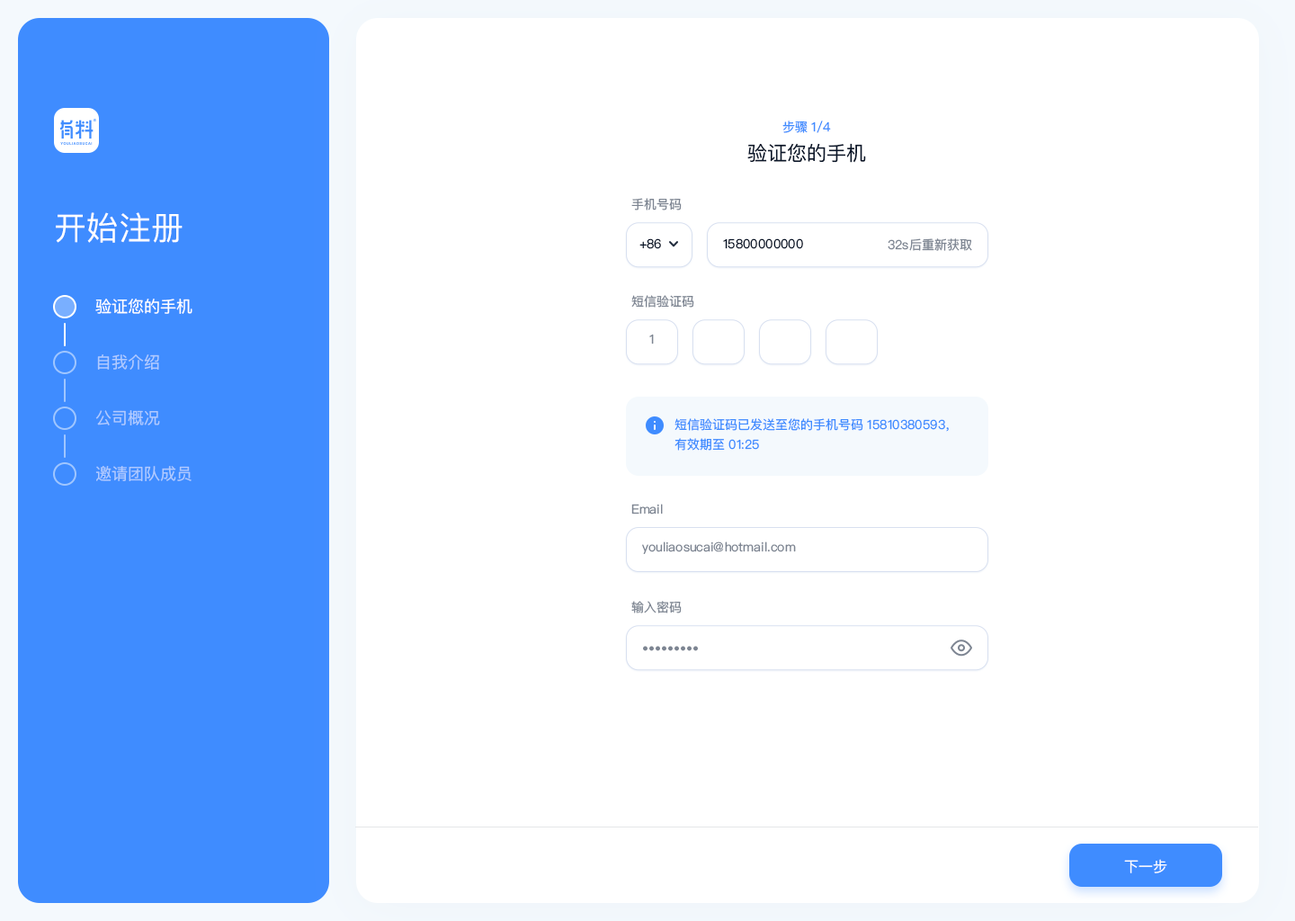
<style>
.page{position:relative;width:1295px;height:921px;background:#ffffff}
.page>*{position:absolute;margin:0}
.t1{font:12.6px "PingFangSC-Regular";color:#3f8cff;text-transform:uppercase}
.t2{font:19.8px "PingFangSC-Regular";color:#0a1629}
.t3{font:12.6px "PingFangSC-Regular";color:#7d8592}
.t4{font:32.4px "PingFangSC-Regular";color:#ffffff}
.t5{font:12.6px "PingFangSC-Regular";color:#0a1629}
.t6{font:16.2px "PingFangSC-Regular";color:#ffffff}
.t7{font:16.2px "PingFangSC-Regular";color:#b0caff}
.t8{font:12.6px/19.8px "PingFangSC-Regular";color:#3f8cff}
.t9{font:14.4px "PingFangSC-Regular";color:#ffffff}
</style>
<div class="page">
<p class="t1" style="left:782px;top:121px;width:49px;height:12px">步骤 1/4</p>
<p class="t2" style="left:747px;top:143px;width:119px;height:20px">验证您的手机</p>
<p class="t3" style="left:631px;top:198px;width:51px;height:12px">手机号码</p>
<p class="t4" style="left:56px;top:212px;width:127px;height:31px">开始注册</p>
<p class="t5" style="left:639px;top:238px;width:22px;height:11px">+86</p>
<p class="t5" style="left:723px;top:238px;width:80px;height:11px">15800000000</p>
<p class="t3" style="left:888px;top:238px;width:84px;height:13px">32s后重新获取</p>
<p class="t6" style="left:95px;top:299px;width:97px;height:15px">验证您的手机</p>
<p class="t3" style="left:631px;top:295px;width:63px;height:13px">短信验证码</p>
<p class="t3" style="left:649px;top:334px;width:5px;height:10px">1</p>
<p class="t7" style="left:97px;top:354px;width:62px;height:16px">自我介绍</p>
<p class="t7" style="left:95px;top:410px;width:65px;height:15px">公司概况</p>
<p class="t8" style="left:674px;top:418px;width:275px;height:33px">短信验证码已发送至您的手机号码 15810380593，有效期至 01:25</p>
<p class="t7" style="left:95px;top:466px;width:97px;height:15px">邀请团队成员</p>
<p class="t3" style="left:631px;top:504px;width:32px;height:10px">Email</p>
<p class="t3" style="left:642px;top:541px;width:154px;height:13px">youliaosucai@hotmail.com</p>
<p class="t3" style="left:631px;top:601px;width:51px;height:12px">输入密码</p>
<p class="t3" style="left:643px;top:646px;width:55px;height:5px">•••••••••</p>
<p class="t9" style="left:1124px;top:859px;width:43px;height:14px">下一步</p>
</div>
